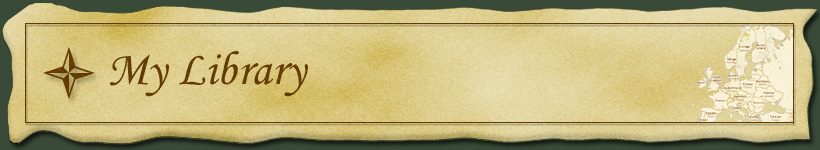
<style>
.page{position:relative;width:820px;height:150px}
.page>*{position:absolute;margin:0}
.t1{font:48px "MonotypeCorsiva";color:#613a02}
</style>
<div class="page">
<p class="t1" style="left:110px;top:51px;width:198px;height:46px">My Library</p>
</div>
